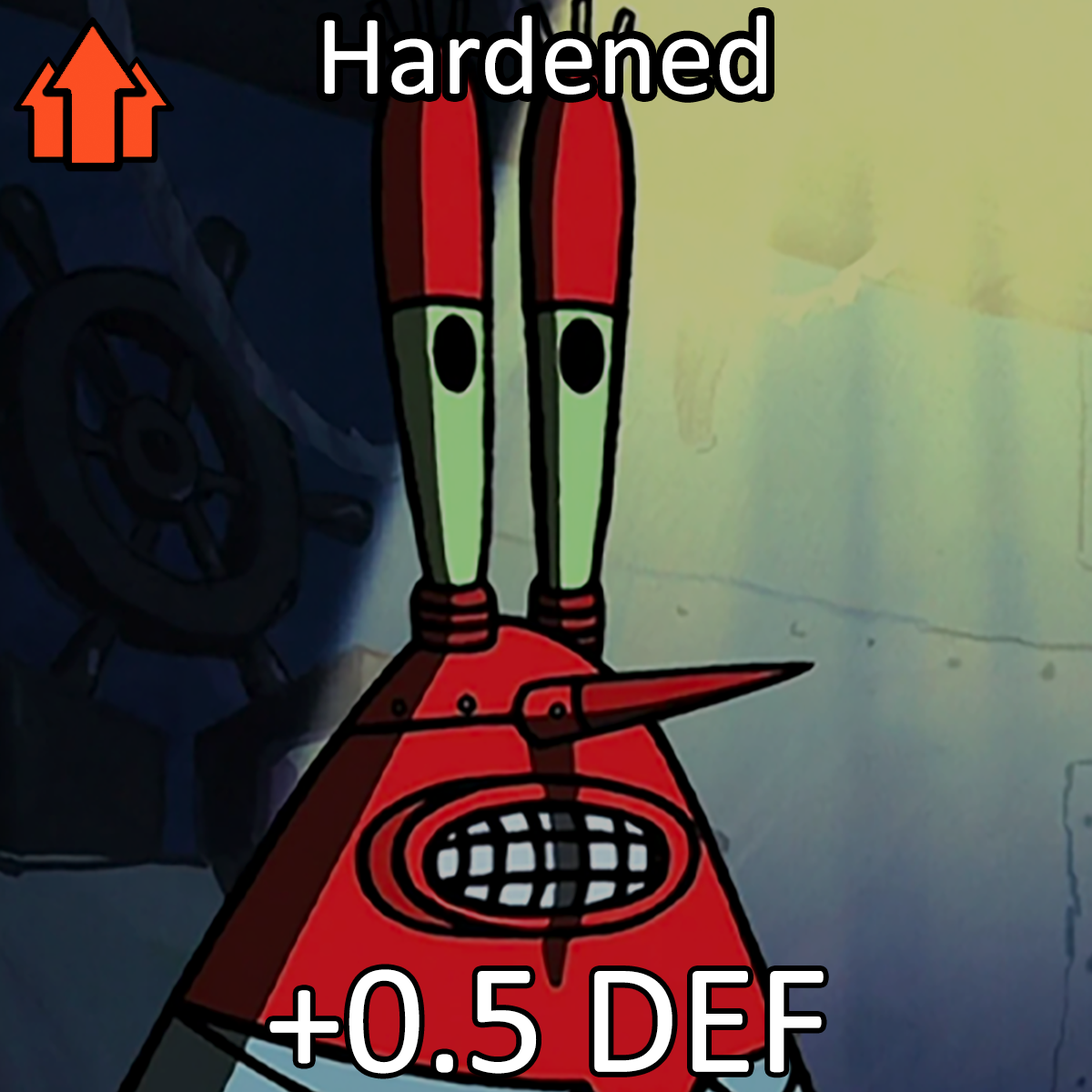
<style>
.page{position:relative;width:1092px;height:1092px}
.page>*{position:absolute;margin:0}
.t1{font:196.6px "Calibri";color:#ffffff}
.t2{font:273px "Calibri";color:#ffffff}
</style>
<div class="page">
<p class="t1" style="left:324px;top:15px;width:442px;height:80px">Hardened</p>
<p class="t2" style="left:269px;top:969px;width:555px;height:105px">+0.5 DEF</p>
</div>
